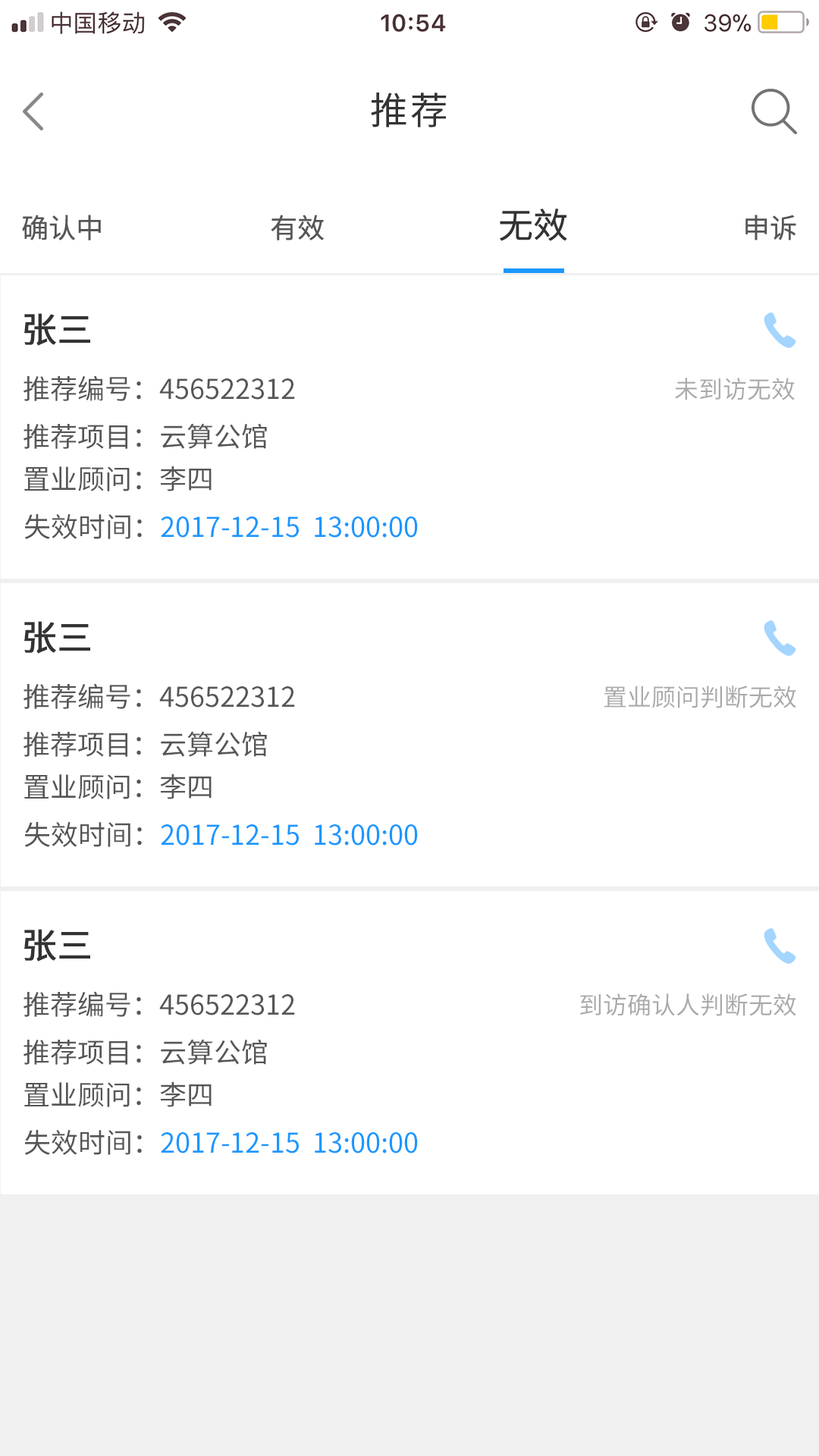
<style>
.page{position:relative;width:819px;height:1456px;background:#ffffff}
.page>*{position:absolute;margin:0}
.t1{font:37.9px "SourceHanSansCN-Regular";letter-spacing:0.06em;color:#333333}
.t2{font:34.9px "SourceHanSansCN-Regular";color:#333333}
.t3{font:27.3px "SourceHanSansCN-Regular";color:#565656}
.t4{font:34.9px "SourceHanSansCN-Regular";color:#333333;font-weight:bold}
.t5{font:24.3px "SourceHanSansCN-Regular";color:#aaaaaa}
.t6{font:27.3px "SourceHanSansCN-Regular";color:#1c97ff}
</style>
<div class="page">
<p class="t1" style="left:371px;top:93px;width:76px;height:34px">推荐</p>
<p class="t2" style="left:500px;top:209px;width:67px;height:32px">无效</p>
<p class="t3" style="left:22px;top:215px;width:79px;height:25px">确认中</p>
<p class="t3" style="left:271px;top:215px;width:53px;height:25px">有效</p>
<p class="t3" style="left:745px;top:215px;width:51px;height:25px">申诉</p>
<p class="t4" style="left:24px;top:313px;width:66px;height:33px">张三</p>
<p class="t3" style="left:24px;top:375px;width:271px;height:26px">推荐编号：456522312</p>
<p class="t5" style="left:675px;top:378px;width:120px;height:22px">未到访无效</p>
<p class="t3" style="left:24px;top:423px;width:243px;height:26px">推荐项目：云算公馆</p>
<p class="t3" style="left:24px;top:466px;width:188px;height:25px">置业顾问：李四</p>
<p class="t6" style="left:24px;top:514px;width:394px;height:25px"><span class="t3">失效时间：</span>2017-12-15  13:00:00</p>
<p class="t4" style="left:24px;top:621px;width:66px;height:33px">张三</p>
<p class="t3" style="left:24px;top:683px;width:271px;height:26px">推荐编号：456522312</p>
<p class="t5" style="left:604px;top:686px;width:192px;height:22px">置业顾问判断无效</p>
<p class="t3" style="left:24px;top:731px;width:243px;height:26px">推荐项目：云算公馆</p>
<p class="t3" style="left:24px;top:773px;width:188px;height:26px">置业顾问：李四</p>
<p class="t6" style="left:24px;top:822px;width:394px;height:25px"><span class="t3">失效时间：</span>2017-12-15  13:00:00</p>
<p class="t4" style="left:24px;top:929px;width:66px;height:33px">张三</p>
<p class="t3" style="left:24px;top:991px;width:271px;height:26px">推荐编号：456522312</p>
<p class="t5" style="left:580px;top:993px;width:216px;height:23px">到访确认人判断无效</p>
<p class="t3" style="left:24px;top:1039px;width:243px;height:26px">推荐项目：云算公馆</p>
<p class="t3" style="left:24px;top:1081px;width:188px;height:26px">置业顾问：李四</p>
<p class="t6" style="left:24px;top:1130px;width:394px;height:25px"><span class="t3">失效时间：</span>2017-12-15  13:00:00</p>
</div>
